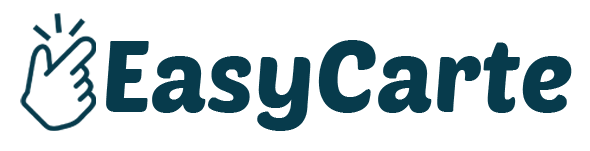
<style>
.page{position:relative;width:590px;height:151px;background:#ffffff}
.page>*{position:absolute;margin:0}
.t1{font:100px "PoetsenOne-Regular";color:#073b4c}
</style>
<div class="page">
<p class="t1" style="left:106px;top:40px;width:466px;height:91px">EasyCarte</p>
</div>
